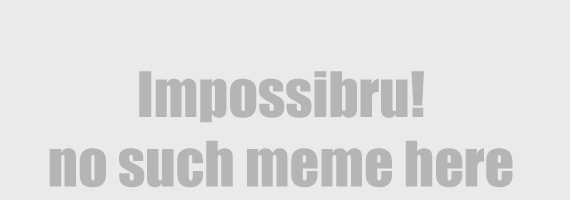
<style>
.page{position:relative;width:570px;height:200px;background:#eaeaea}
.page>*{position:absolute;margin:0}
.t1{font:58px "Impact";color:#b5b5b5}
</style>
<div class="page">
<p class="t1" style="left:49px;top:71px;width:464px;height:117px;text-align:center">Impossibru!<br>no such meme here</p>
</div>
